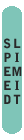
<style>
.page{position:relative;width:24px;height:140px;background:#7fc5b8}
.page>*{position:absolute;margin:0}
.t1{font:12.5px/14px "BellGothicStd-Black";letter-spacing:-0.025em;color:#292929}
</style>
<div class="page">
<p class="t1" style="left:3px;top:38px;width:19px;height:66px">S L<br>P I<br>EM<br>E I<br>D T</p>
</div>
